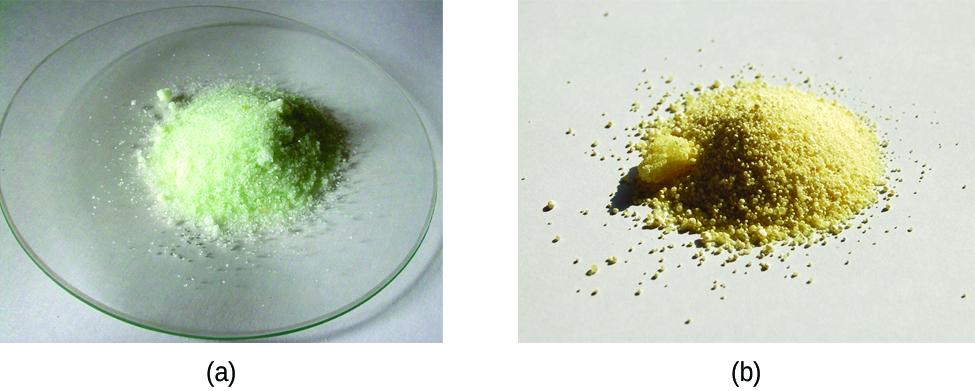
<style>
.page{position:relative;width:975px;height:391px}
.page>*{position:absolute;margin:0}
.t1{font:27.1px "LiberationSans";color:#000000;scale:0.92 1}
</style>
<div class="page">
<p class="t1" style="left:207px;top:361px;width:28px;height:26px">(a)</p>
<p class="t1" style="left:732px;top:361px;width:28px;height:26px">(b)</p>
</div>
